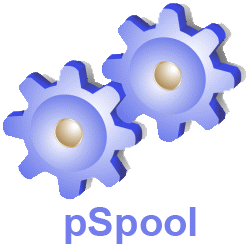
<style>
.page{position:relative;width:250px;height:250px;background:#ffffff}
.page>*{position:absolute;margin:0}
.t1{font:40px "Arial-BoldMT";color:#737eec}
</style>
<div class="page">
<p class="t1" style="left:65px;top:207px;width:131px;height:37px">pSpool</p>
</div>
